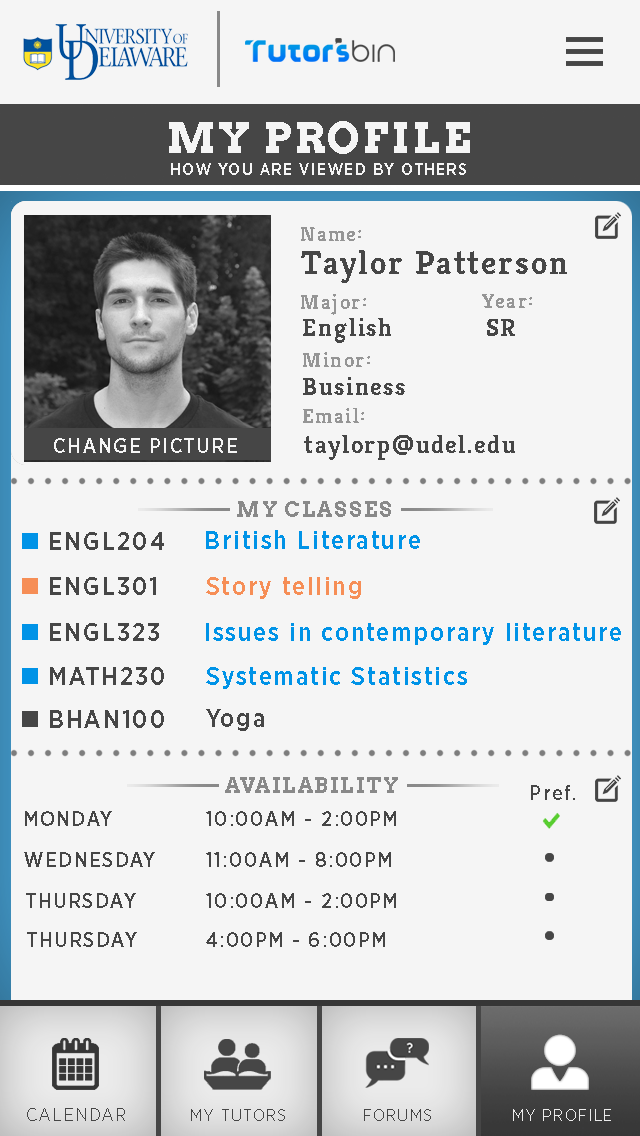
<style>
.page{position:relative;width:640px;height:1136px;background:#f5f5f5}
.page>*{position:absolute;margin:0}
.t1{font:41.7px "Arvo-Bold";letter-spacing:0.075em;color:#f5f5f5}
.t2{font:16.7px "GothamNarrow-Medium";letter-spacing:0.075em;color:#f5f5f5}
.t3{font:20.8px "Kreon-Bold";letter-spacing:0.075em;color:#959595}
.t4{font:33.3px "Kreon-Bold";letter-spacing:0.075em;color:#464646}
.t5{font:25px "Kreon-Bold";letter-spacing:0.075em;color:#464646}
.t6{font:20.8px "GothamNarrow-Medium";letter-spacing:0.075em;color:#f5f5f5}
.t7{font:20.8px "Arvo-Bold";letter-spacing:0.075em;color:#898989}
.t8{font:25px "GothamNarrow-Medium";letter-spacing:0.075em;color:#464646}
.t9{font:25px "GothamNarrow-Medium";letter-spacing:0.075em;color:#0093e7}
.t10{font:25px "GothamNarrow-Medium";letter-spacing:0.075em;color:#f68e56}
.t11{font:20.8px "GothamNarrow-Medium";letter-spacing:0.075em;color:#464646}
.t12{font:18.4px "GothamNarrow-Light";letter-spacing:0.075em;color:#464646}
.t13{font:16.7px "GothamNarrow-Light";letter-spacing:0.075em;color:#464646}
.t14{font:16.7px "GothamNarrow-Light";letter-spacing:0.075em;color:#ebebeb}
</style>
<div class="page">
<p class="t1" style="left:169px;top:121px;width:301px;height:33px">MY PROFILE</p>
<p class="t2" style="left:171px;top:163px;width:295px;height:12px">HOW YOU ARE VIEWED BY OTHERS</p>
<p class="t3" style="left:301px;top:227px;width:60px;height:14px">Name:</p>
<p class="t4" style="left:301px;top:250px;width:266px;height:33px">Taylor Patterson</p>
<p class="t3" style="left:301px;top:294px;width:65px;height:21px">Major:</p>
<p class="t3" style="left:482px;top:294px;width:50px;height:14px">Year:</p>
<p class="t5" style="left:303px;top:318px;width:88px;height:25px">English</p>
<p class="t5" style="left:487px;top:319px;width:28px;height:17px">SR</p>
<p class="t3" style="left:303px;top:352px;width:67px;height:15px">Minor:</p>
<p class="t5" style="left:303px;top:377px;width:102px;height:18px">Business</p>
<p class="t3" style="left:303px;top:408px;width:61px;height:15px">Email:</p>
<p class="t6" style="left:54px;top:438px;width:183px;height:15px">CHANGE PICTURE</p>
<p class="t5" style="left:304px;top:435px;width:211px;height:25px">taylorp@udel.edu</p>
<p class="t7" style="left:237px;top:501px;width:154px;height:16px">MY CLASSES</p>
<p class="t8" style="left:50px;top:532px;width:114px;height:18px">ENGL204</p>
<p class="t9" style="left:206px;top:530px;width:214px;height:19px">British Literature</p>
<p class="t8" style="left:50px;top:577px;width:106px;height:18px">ENGL301</p>
<p class="t10" style="left:206px;top:577px;width:155px;height:22px">Story telling</p>
<p class="t8" style="left:50px;top:623px;width:109px;height:18px">ENGL323</p>
<p class="t9" style="left:206px;top:623px;width:415px;height:22px">Issues in contemporary literature</p>
<p class="t8" style="left:50px;top:667px;width:114px;height:18px">MATH230</p>
<p class="t9" style="left:206px;top:667px;width:261px;height:22px">Systematic Statistics</p>
<p class="t8" style="left:50px;top:710px;width:114px;height:18px">BHAN100</p>
<p class="t8" style="left:206px;top:709px;width:58px;height:22px">Yoga</p>
<p class="t7" style="left:225px;top:777px;width:173px;height:16px">AVAILABILITY</p>
<p class="t11" style="left:531px;top:785px;width:44px;height:15px">Pref.</p>
<p class="t11" style="left:25px;top:811px;width:87px;height:15px">MONDAY</p>
<p class="t11" style="left:206px;top:811px;width:190px;height:15px">10:00AM - 2:00PM</p>
<p class="t11" style="left:24px;top:852px;width:131px;height:15px">WEDNESDAY</p>
<p class="t11" style="left:206px;top:852px;width:185px;height:15px">11:00AM - 8:00PM</p>
<p class="t11" style="left:26px;top:893px;width:110px;height:15px">THURSDAY</p>
<p class="t11" style="left:206px;top:893px;width:190px;height:15px">10:00AM - 2:00PM</p>
<p class="t11" style="left:27px;top:932px;width:110px;height:15px">THURSDAY</p>
<p class="t11" style="left:206px;top:932px;width:179px;height:15px">4:00PM - 6:00PM</p>
<p class="t12" style="left:27px;top:1108px;width:98px;height:13px">CALENDAR</p>
<p class="t13" style="left:191px;top:1109px;width:94px;height:12px">MY TUTORS</p>
<p class="t13" style="left:364px;top:1109px;width:67px;height:12px">FORUMS</p>
<p class="t14" style="left:513px;top:1109px;width:98px;height:12px">MY PROFILE</p>
</div>
